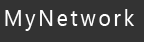
<style>
.page{position:relative;width:144px;height:42px;background:#333333}
.page>*{position:absolute;margin:0}
.t1{font:23.3px "SegoeUI";letter-spacing:0.15em;color:#ffffff;scale:0.88 1}
</style>
<div class="page">
<p class="t1" style="left:5px;top:9px;width:129px;height:22px">MyNetwork</p>
</div>
